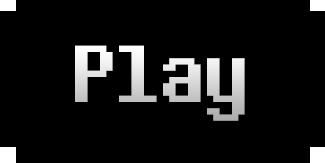
<style>
.page{position:relative;width:325px;height:163px;background:#000000}
.page>*{position:absolute;margin:0}
.t1{font:100px "8bitoperator-JVE"}
</style>
<div class="page">
<p class="t1" style="left:75px;top:45px;width:170px;height:76px">Play</p>
</div>
